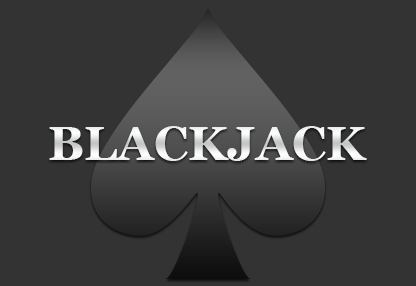
<style>
.page{position:relative;width:416px;height:286px;background:#333333}
.page>*{position:absolute;margin:0}
.t1{font:48px "Georgia-Bold";color:#ffffff}
</style>
<div class="page">
<p class="t1" style="left:49px;top:126px;width:318px;height:35px">BLACKJACK</p>
</div>
